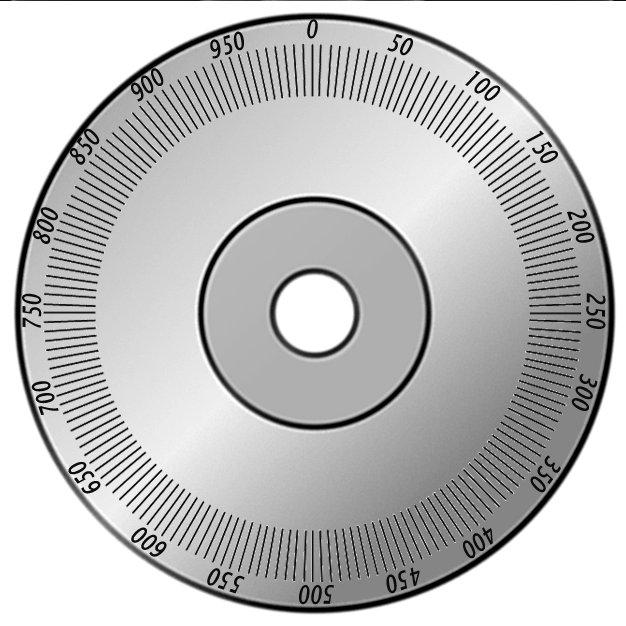
<style>
.page{position:relative;width:626px;height:626px;background:#ffffff}
.page>*{position:absolute;margin:0}
.t1{font:25.2px "LucidaSans-DemiItalic";letter-spacing:0.025em;color:#0b0b0b;scale:0.71 1}
.t2{font:25.2px "LucidaSans-DemiItalic";letter-spacing:0.025em;scale:0.71 1}
</style>
<div class="page">
<p class="t1" style="left:210px;top:30px;width:34px;height:28px;rotate:-18deg">950</p>
<p class="t1" style="left:307px;top:18px;width:11px;height:20px">0</p>
<p class="t1" style="left:387px;top:32px;width:26px;height:23px;rotate:18deg">50</p>
<p class="t1" style="left:131px;top:67px;width:33px;height:34px;rotate:-36deg">900</p>
<p class="t2" style="left:465px;top:69px;width:36px;height:31px;rotate:36deg">100</p>
<p class="t1" style="left:69px;top:127px;width:31px;height:37px;rotate:-54deg">850</p>
<p class="t2" style="left:526px;top:129px;width:32px;height:33px;rotate:54deg">150</p>
<p class="t1" style="left:33px;top:206px;width:25px;height:37px;rotate:-72deg">800</p>
<p class="t2" style="left:567px;top:208px;width:28px;height:34px;rotate:72deg">200</p>
<p class="t2" style="left:22px;top:292px;width:20px;height:35px;rotate:-90deg">750</p>
<p class="t1" style="left:586px;top:292px;width:20px;height:36px;rotate:90deg">250</p>
<p class="t1" style="left:571px;top:372px;width:27px;height:38px;rotate:108deg">300</p>
<p class="t2" style="left:31px;top:380px;width:28px;height:34px;rotate:-108deg">700</p>
<p class="t2" style="left:68px;top:461px;width:33px;height:32px;rotate:-126deg">650</p>
<p class="t1" style="left:530px;top:454px;width:31px;height:38px;rotate:126deg">350</p>
<p class="t2" style="left:131px;top:526px;width:36px;height:30px;rotate:-144deg">600</p>
<p class="t1" style="left:463px;top:526px;width:30px;height:32px;rotate:144deg">400</p>
<p class="t1" style="left:207px;top:567px;width:38px;height:26px;rotate:-162deg">550</p>
<p class="t1" style="left:386px;top:566px;width:34px;height:27px;rotate:162deg">450</p>
<p class="t1" style="left:299px;top:584px;width:35px;height:20px;rotate:-180deg">500</p>
</div>
